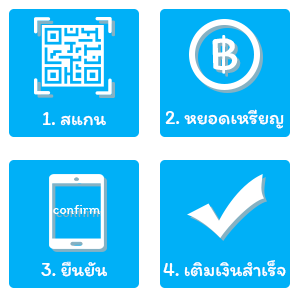
<style>
.page{position:relative;width:300px;height:300px;background:#00b0f7}
.page>*{position:absolute;margin:0}
.t1{font:19.4px "Itim-Regular";color:#ffffff}
</style>
<div class="page">
<p class="t1" style="left:43px;top:112px;width:63px;height:14px">1. สแกน</p>
<p class="t1" style="left:165px;top:109px;width:119px;height:20px">2. หยอดเหรียญ</p>
<p class="t1" style="left:41px;top:261px;width:66px;height:16px">3. ยืนยัน</p>
<p class="t1" style="left:163px;top:260px;width:123px;height:17px">4. เติมเงินสำเร็จ</p>
</div>
